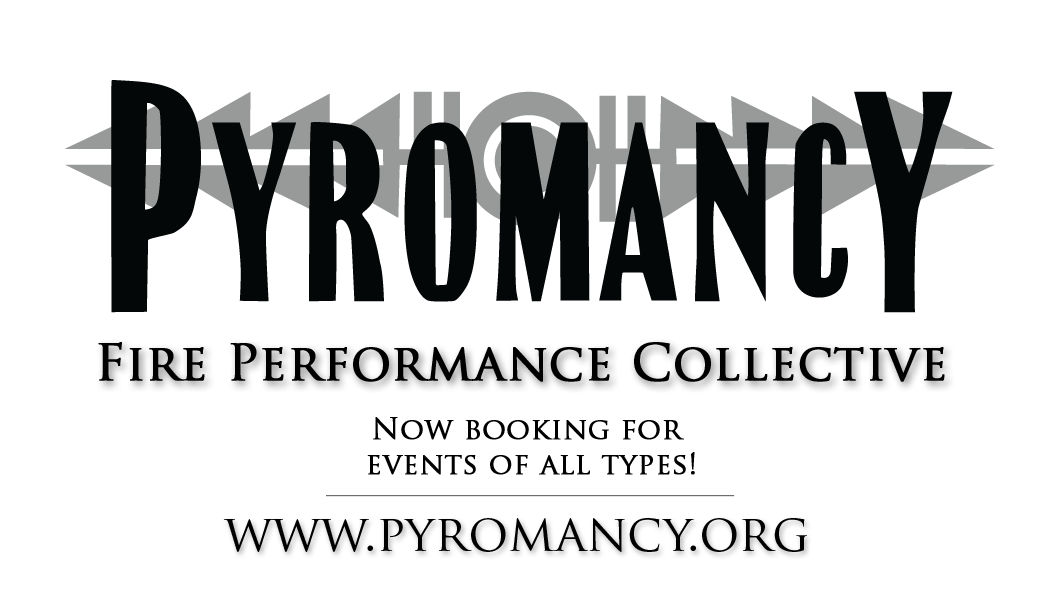
<style>
.page{position:relative;width:1050px;height:600px;background:#ffffff}
.page>*{position:absolute;margin:0}
.t1{font:49.8px "TrajanPro-Regular";color:#000000;font-weight:bold}
.t2{font:29.1px "TrajanPro-Regular";color:#000000;font-weight:bold}
.t3{font:49.8px "TrajanPro-Regular";color:#000000}
</style>
<div class="page">
<p class="t1" style="left:98px;top:342px;width:847px;height:40px">Fire Performance Collective</p>
<p class="t2" style="left:367px;top:417px;width:328px;height:58px;text-align:center">Now booking for <br>events of all types!</p>
<p class="t3" style="left:223px;top:518px;width:584px;height:34px">www.pyromancy.org</p>
</div>
